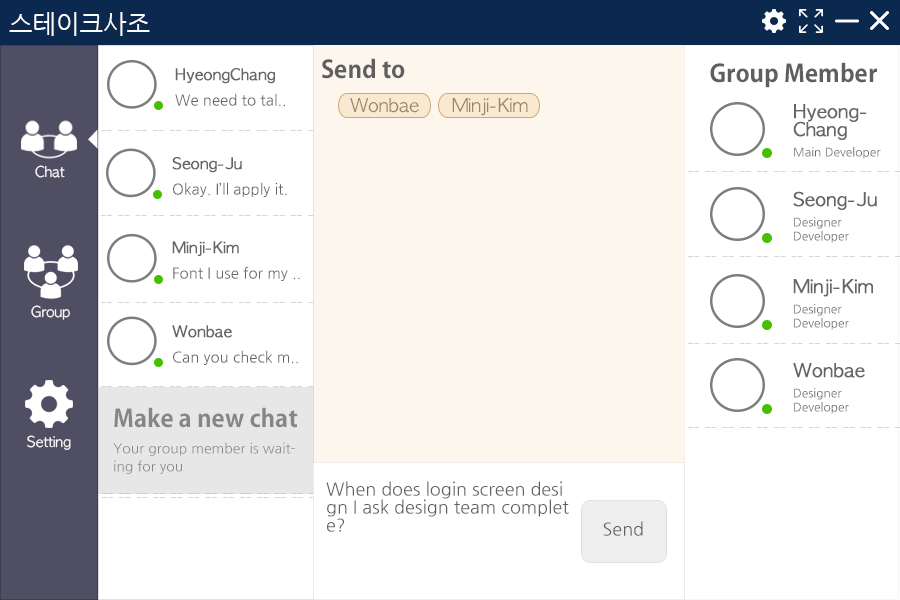
<style>
.page{position:relative;width:900px;height:600px;background:#ffffff}
.page>*{position:absolute;margin:0}
.t1{font:25px "NanumGothic";color:#fcfafa}
.t2{font:24px "AdobeGothicStd-Bold";color:#5f5f5f}
.t3{font:15px/8px "NanumGothic";color:#656565}
.t4{font:15px/18px "AppleGothic";color:#656565;font-weight:bold}
.t5{font:18px "AppleGothic";color:#9d8566}
.t6{font:18px/18px "AppleGothic";color:#656565;font-weight:bold}
.t7{font:12px/8px "NanumGothic";color:#656565}
.t8{font:12px/12px "NanumGothic";color:#656565}
.t9{font:15px/14px "NanumGothic";color:#656565}
.t10{font:14px "AppleGothic";color:#fcfafa}
.t11{font:12px/14px "NanumGothic";color:#656565}
.t12{font:14px/18px "NanumGothic";color:#868686}
.t13{font:24px/18px "AdobeGothicStd-Bold";color:#868686}
.t14{font:18px/18px "NanumGothic";color:#5f5f5f}
.t15{font:18px "NanumGothic";color:#5f5f5f}
</style>
<div class="page">
<p class="t1" style="left:9px;top:12px;width:141px;height:24px">스테이크사조</p>
<p class="t2" style="left:322px;top:58px;width:83px;height:21px">Send to</p>
<p class="t2" style="left:710px;top:62px;width:167px;height:26px">Group Member</p>
<p class="t3" style="left:175px;top:68px;width:110px;height:39px"><span class="t4">HyeongChang<br></span><br>We need to tal..</p>
<p class="t5" style="left:350px;top:98px;width:69px;height:15px">Wonbae</p>
<p class="t5" style="left:452px;top:98px;width:76px;height:18px">Minji-Kim</p>
<p class="t6" style="left:793px;top:104px;width:88px;height:55px">Hyeong-<br>Chang<br><br><span class="t7">Main Develope</span><span class="t8">r</span></p>
<p class="t9" style="left:172px;top:157px;width:115px;height:40px"><span class="t4">Seong-Ju<br><br></span>Okay. I’ll apply it.</p>
<p class="t10" style="left:35px;top:165px;width:30px;height:13px">Chat</p>
<p class="t11" style="left:793px;top:191px;width:84px;height:52px"><span class="t6">Seong-Ju<br><br></span>Designer<br>Developer</p>
<p class="t9" style="left:172px;top:241px;width:128px;height:40px"><span class="t4">Minji-Kim<br><br></span>Font I use for my ..</p>
<p class="t11" style="left:793px;top:279px;width:80px;height:51px"><span class="t6">Minji-Kim<br><br></span>Designer<br>Developer</p>
<p class="t10" style="left:31px;top:305px;width:39px;height:15px">Group</p>
<p class="t9" style="left:172px;top:325px;width:126px;height:40px"><span class="t4">Wonbae<br><br></span>Can you check m..</p>
<p class="t11" style="left:793px;top:363px;width:72px;height:51px"><span class="t6">Wonbae<br><br></span>Designer<br>Developer</p>
<p class="t12" style="left:113px;top:407px;width:185px;height:67px"><span class="t13">Make a new chat<br><br></span>Your group member is wait-<br>ing for you</p>
<p class="t10" style="left:27px;top:435px;width:44px;height:15px">Setting</p>
<p class="t14" style="left:326px;top:481px;width:243px;height:51px">When does login screen desi<br>gn I ask design team complet<br>e?</p>
<p class="t15" style="left:603px;top:521px;width:40px;height:15px">Send</p>
</div>
